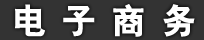
<style>
.page{position:relative;width:204px;height:40px;background:#333333}
.page>*{position:absolute;margin:0}
.t1{font:34px "HYb2gj";letter-spacing:0.44em;color:#ffffff;font-weight:bold}
</style>
<div class="page">
<p class="t1" style="left:15px;top:4px;width:180px;height:33px">电子商务</p>
</div>
